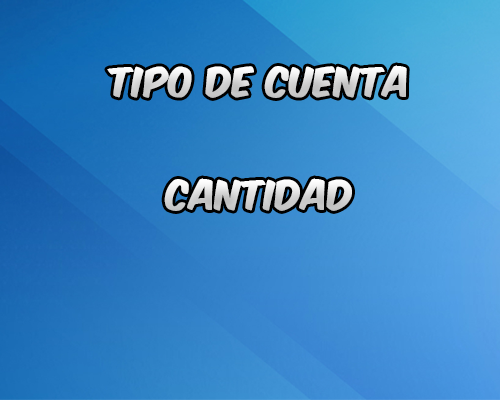
<style>
.page{position:relative;width:500px;height:400px}
.page>*{position:absolute;margin:0}
.t1{font:35.4px "KomikaAxis"}
</style>
<div class="page">
<p class="t1" style="left:107px;top:65px;width:300px;height:33px">TIPO DE CUENTA</p>
<p class="t1" style="left:164px;top:178px;width:188px;height:33px">CANTIDAD</p>
</div>
